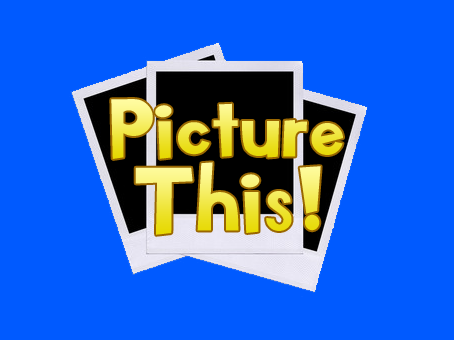
<style>
.page{position:relative;width:454px;height:340px;background:#005aff}
.page>*{position:absolute;margin:0}
.t1{font:82px "KidZone"}
.t2{font:90px "KidZone"}
</style>
<div class="page">
<p class="t1" style="left:111px;top:99px;width:232px;height:60px">Picture</p>
<p class="t2" style="left:135px;top:162px;width:186px;height:73px">This!</p>
</div>
